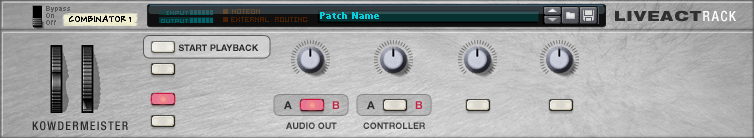
<style>
.page{position:relative;width:754px;height:138px}
.page>*{position:absolute;margin:0}
.t1{font:14px "HelveticaNeueLTStd-BlkEx";letter-spacing:0.1em;color:#2f2f2f;text-transform:uppercase}
.t2{font:14px "HelveticaNeueLTStd-MdCn";letter-spacing:0.1em;color:#ffffff;text-transform:uppercase}
.t3{font:9px "HelveticaNeueLTStd-Bd";color:#2a2a2a;text-transform:uppercase}
.t4{font:11px "HelveticaNeueLTStd-Bd";color:#2c2c2c;text-transform:uppercase}
.t5{font:11px "HelveticaNeueLTStd-Bd";color:#bf2644;text-transform:uppercase}
.t6{font:11px "HelveticaNeueLTStd-Bd";color:#2e2e2e;text-transform:uppercase}
.t7{font:12px "HelveticaNeueLTStd-MdCn";letter-spacing:0.1em;color:#282828;text-transform:uppercase}
.t8{font:9px "HelveticaNeueLTStd-Bd";color:#3d3d3d;text-transform:uppercase}
.t9{font:9px "HelveticaNeueLTStd-Bd";color:#3f3f3f;text-transform:uppercase}
</style>
<div class="page">
<p class="t1" style="left:615px;top:10px;width:121px;height:12px">LIVEACT<span class="t2">rack</span></p>
<p class="t3" style="left:178px;top:44px;width:81px;height:7px">START PLAYBACK</p>
<p class="t4" style="left:284px;top:101px;width:8px;height:8px">A</p>
<p class="t5" style="left:332px;top:101px;width:8px;height:8px">B</p>
<p class="t6" style="left:367px;top:101px;width:8px;height:8px">A</p>
<p class="t5" style="left:415px;top:101px;width:8px;height:8px">B</p>
<p class="t7" style="left:32px;top:121px;width:96px;height:10px">kowdermeister</p>
<p class="t8" style="left:286px;top:122px;width:51px;height:7px">Audio out</p>
<p class="t9" style="left:363px;top:122px;width:62px;height:7px">CONTROLLER</p>
</div>
